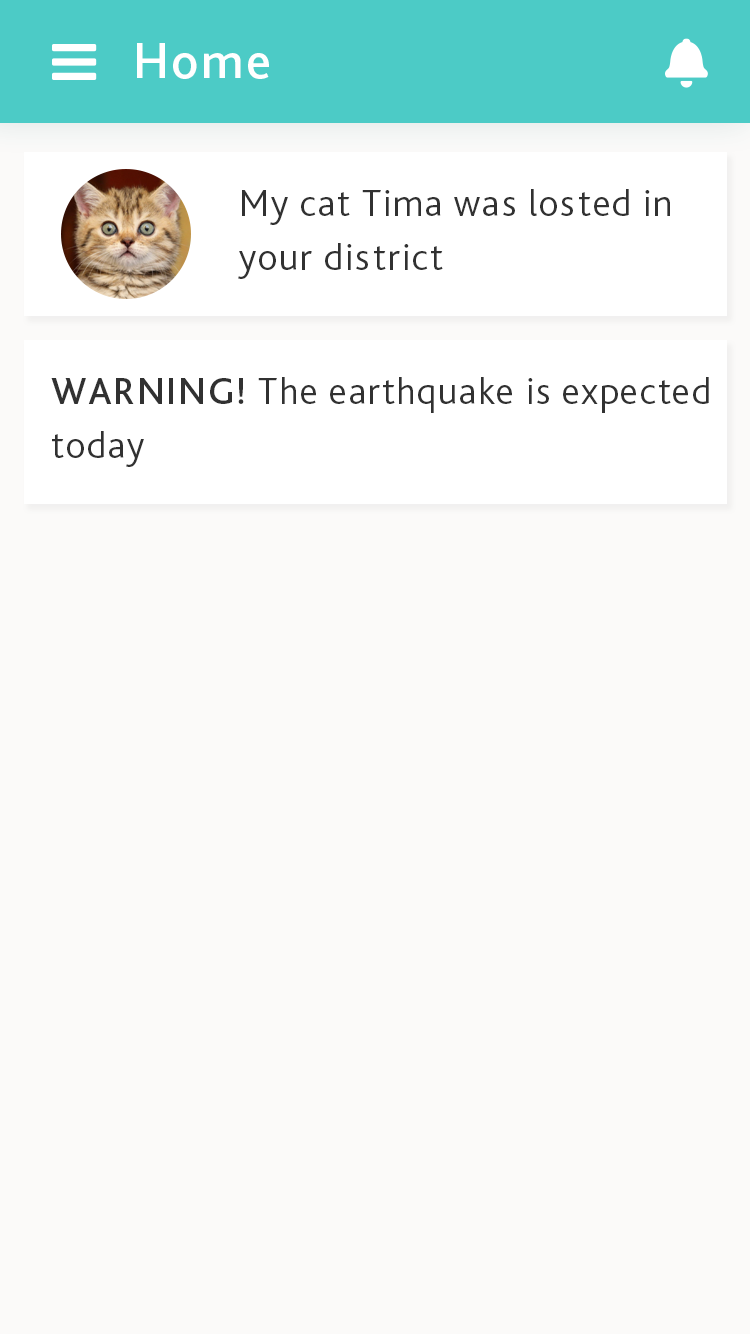
<style>
.page{position:relative;width:750px;height:1334px;background:#fbfaf9}
.page>*{position:absolute;margin:0}
.t1{font:51.7px "BlissPro-Medium";letter-spacing:0.04em;color:#ffffff}
.t2{font:38.3px/54.3px "BlissPro-Light";letter-spacing:0.04em;color:#313131}
.t3{font:38.3px/54.3px "BlissPro-Medium";letter-spacing:0.04em;color:#313131}
</style>
<div class="page">
<p class="t1" style="left:137px;top:43px;width:132px;height:36px">Home</p>
<p class="t2" style="left:238px;top:189px;width:432px;height:90px">My cat Tima was losted in <br>your district</p>
<p class="t2" style="left:51px;top:377px;width:658px;height:90px"><span class="t3">WARNING!</span> The earthquake is expected <br>today</p>
</div>
